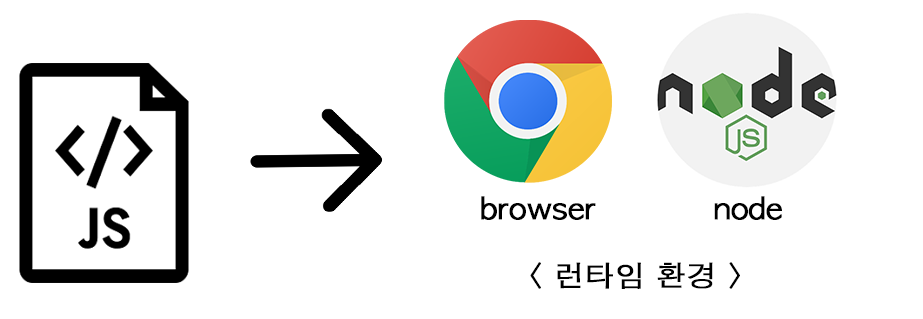
<style>
.page{position:relative;width:923px;height:319px;background:#ffffff}
.page>*{position:absolute;margin:0}
.t1{font:29.1px "AppleGothic";letter-spacing:-0.01em;color:#000000;font-weight:bold;scale:1.03 1}
</style>
<div class="page">
<p class="t1" style="left:481px;top:196px;width:115px;height:24px">browser</p>
<p class="t1" style="left:714px;top:196px;width:68px;height:24px">node</p>
<p class="t1" style="left:530px;top:262px;width:210px;height:27px">&lt; 런타임 환경 &gt;</p>
</div>
